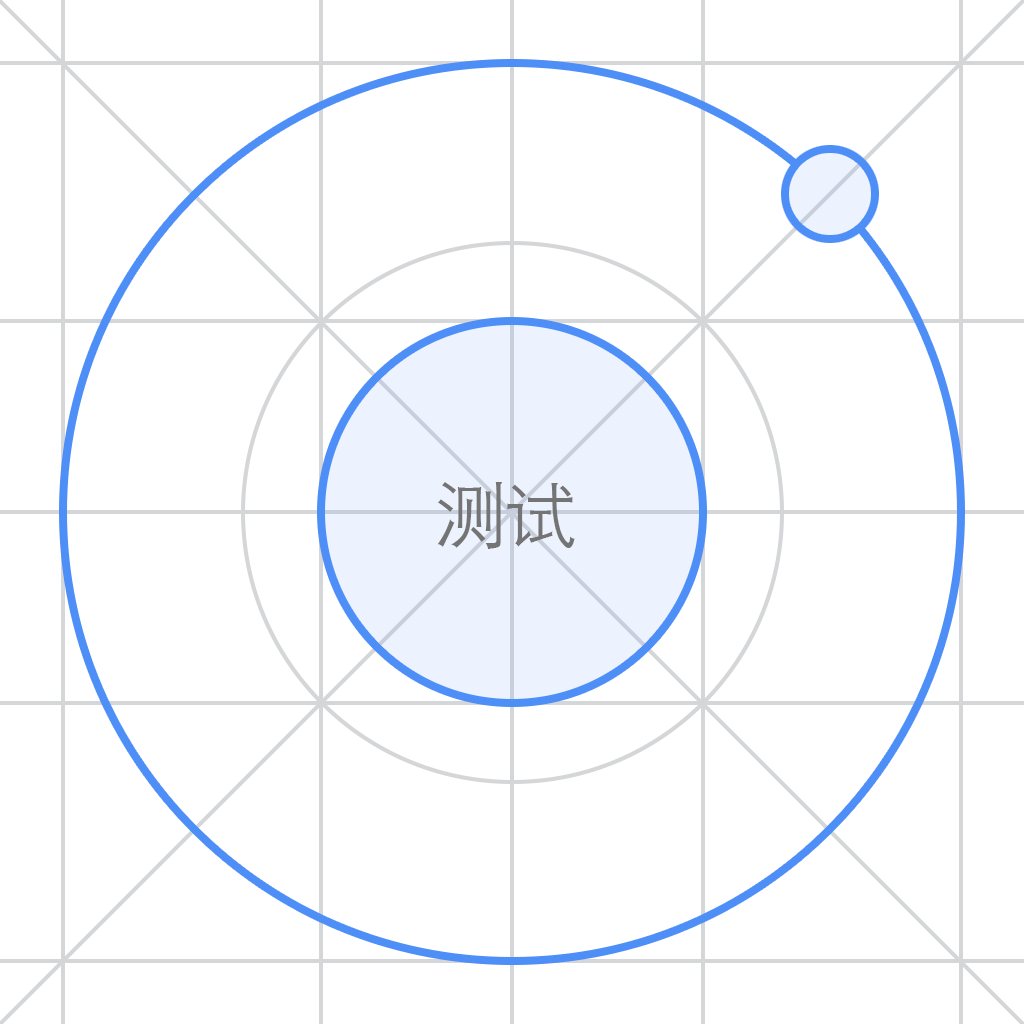
<style>
.page{position:relative;width:1024px;height:1024px;background:#ffffff}
.page>*{position:absolute;margin:0}
.t1{font:72px "STHeitiSC-Light";letter-spacing:-0.012em;color:#757474}
</style>
<div class="page">
<p class="t1" style="left:437px;top:482px;width:138px;height:67px">测试</p>
</div>
